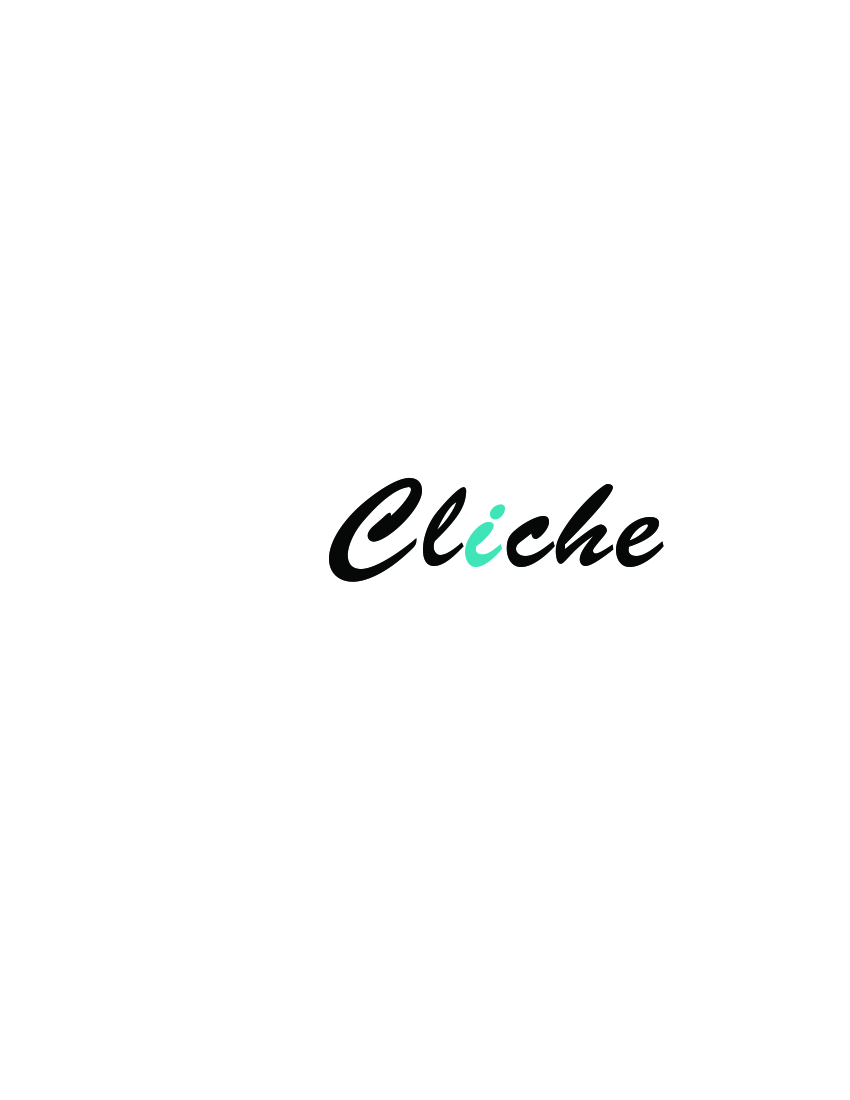
<style>
.page{position:relative;width:850px;height:1100px;background:#ffffff}
.page>*{position:absolute;margin:0}
.t1{font:125.1px "BrushScriptStd";letter-spacing:0.04em;color:#060808}
.t2{font:125.1px "BrushScriptStd";letter-spacing:0.04em;color:#3fe4b7}
</style>
<div class="page">
<p class="t1" style="left:329px;top:477px;width:335px;height:105px">Cl<span class="t2">i</span>che</p>
</div>
